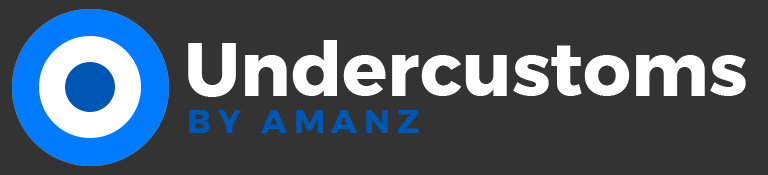
<style>
.page{position:relative;width:768px;height:175px;background:#333333}
.page>*{position:absolute;margin:0}
.t1{font:75px "Montserrat-Bold";color:#ffffff}
.t2{font:33.3px "Montserrat-Bold";letter-spacing:0.2em;color:#0056b3;text-transform:uppercase}
</style>
<div class="page">
<p class="t1" style="left:188px;top:40px;width:558px;height:57px">Undercustoms</p>
<p class="t2" style="left:189px;top:110px;width:230px;height:23px">by amanz</p>
</div>
